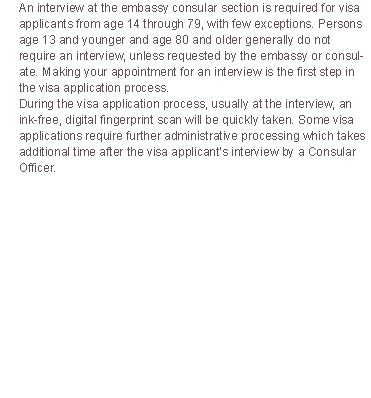
<style>
.page{position:relative;width:371px;height:398px;background:#ffffff}
.page>*{position:absolute;margin:0}
.t1{font:12px/16px "ArialMT";color:#5f5158}
</style>
<div class="page">
<p class="t1" style="left:19px;top:3px;width:346px;height:169px">An interview at the embassy consular section is required for visa applicants from age 14 through 79, with few exceptions. Persons age 13 and younger and age 80 and older generally do not require an interview, unless requested by the embassy or consulate. Making your appointment for an interview is the first step in the visa application process.<br>During the visa application process, usually at the interview, an ink-free, digital fingerprint scan will be quickly taken. Some visa applications require further administrative processing which takes additional time after the visa applicant’s interview by a Consular Officer.</p>
</div>
